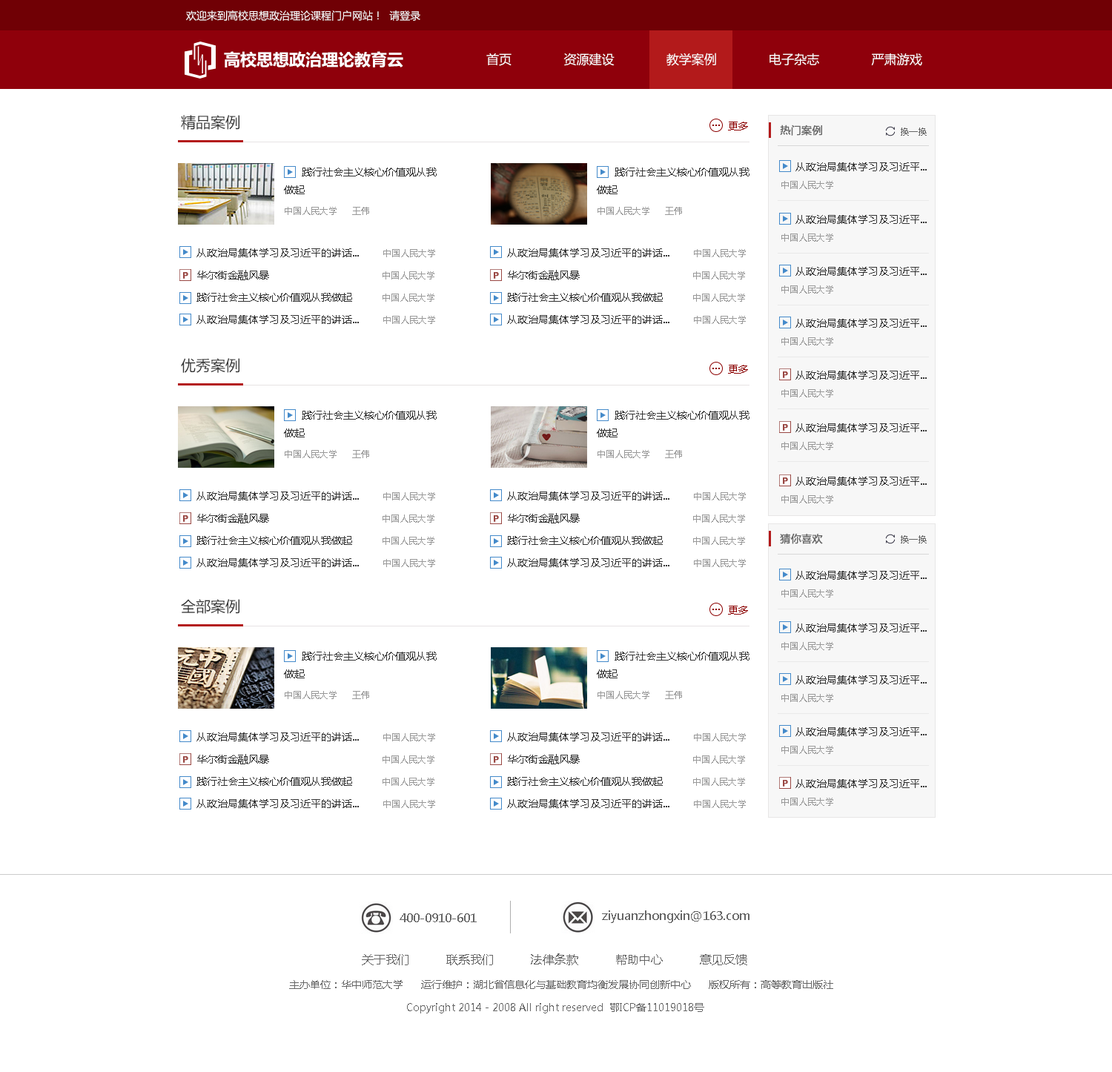
<style>
.page{position:relative;width:1112px;height:1072px;background:#ffffff}
.page>*{position:absolute;margin:0}
.t1{font:10.4px "MicrosoftYaHei";color:#ffffff}
.t2{font:16.3px "MicrosoftYaHei-Bold";color:#ffffff}
.t3{font:12.6px "MicrosoftYaHei";color:#ffffff}
.t4{font:14.8px "MicrosoftYaHei";color:#333333}
.t5{font:10.4px "MicrosoftYaHei";color:#8c0000}
.t6{font:10.4px "MicrosoftYaHei";color:#666666;font-weight:bold}
.t7{font:8.9px "MicrosoftYaHei";color:#666666}
.t8{font:10.4px/17.8px "MicrosoftYaHei";color:#333333}
.t9{font:10.4px/19.3px "MicrosoftYaHei";color:#333333}
.t10{font:8.9px/19.3px "MicrosoftYaHei";color:#999999}
.t11{font:8.9px "MicrosoftYaHei";color:#999999}
.t12{font:10.4px/22.2px "MicrosoftYaHei";color:#333333}
.t13{font:8.9px/22.2px "MicrosoftYaHei";color:#999999}
.t14{font:11.9px "MicrosoftYaHei";color:#666666}
.t15{font:10.4px "MicrosoftYaHei";color:#666666}
</style>
<div class="page">
<p class="t1" style="left:186px;top:10px;width:234px;height:11px">欢迎来到高校思想政治理论课程门户网站！  请登录</p>
<p class="t2" style="left:224px;top:51px;width:179px;height:16px">高校思想政治理论教育云</p>
<p class="t3" style="left:486px;top:53px;width:436px;height:13px">首页              资源建设              教学案例              电子杂志              严肃游戏</p>
<p class="t4" style="left:181px;top:115px;width:58px;height:15px">精品案例</p>
<p class="t5" style="left:728px;top:122px;width:20px;height:8px">更多</p>
<p class="t6" style="left:780px;top:125px;width:42px;height:11px">热门案例</p>
<p class="t7" style="left:901px;top:128px;width:26px;height:8px">换一换</p>
<p class="t8" style="left:284px;top:168px;width:153px;height:26px">践行社会主义核心价值观从我<br>做起</p>
<p class="t8" style="left:597px;top:168px;width:153px;height:26px">践行社会主义核心价值观从我<br>做起</p>
<p class="t9" style="left:781px;top:162px;width:146px;height:27px">从政治局集体学习及习近平...        <br><span class="t10">中国人民大学</span></p>
<p class="t11" style="left:285px;top:207px;width:84px;height:8px">中国人民大学     王伟</p>
<p class="t11" style="left:598px;top:207px;width:84px;height:8px">中国人民大学     王伟</p>
<p class="t9" style="left:781px;top:215px;width:146px;height:27px">从政治局集体学习及习近平...        <br><span class="t10">中国人民大学</span></p>
<p class="t12" style="left:196px;top:248px;width:239px;height:76px">从政治局集体学习及习近平的讲话...        <span class="t13">中国人民大学<br></span>华尔街金融风暴                                      <span class="t13">中国人民大学<br></span>践行社会主义核心价值观从我做起          <span class="t13">中国人民大学<br></span>从政治局集体学习及习近平的讲话...        <span class="t13">中国人民大学</span></p>
<p class="t12" style="left:507px;top:248px;width:239px;height:76px">从政治局集体学习及习近平的讲话...        <span class="t13">中国人民大学<br></span>华尔街金融风暴                                      <span class="t13">中国人民大学<br></span>践行社会主义核心价值观从我做起          <span class="t13">中国人民大学<br></span>从政治局集体学习及习近平的讲话...        <span class="t13">中国人民大学</span></p>
<p class="t9" style="left:781px;top:267px;width:146px;height:27px">从政治局集体学习及习近平...        <br><span class="t10">中国人民大学</span></p>
<p class="t9" style="left:781px;top:319px;width:146px;height:27px">从政治局集体学习及习近平...        <br><span class="t10">中国人民大学</span></p>
<p class="t4" style="left:181px;top:358px;width:58px;height:15px">优秀案例</p>
<p class="t5" style="left:728px;top:365px;width:20px;height:9px">更多</p>
<p class="t9" style="left:781px;top:371px;width:146px;height:26px">从政治局集体学习及习近平...        <br><span class="t10">中国人民大学</span></p>
<p class="t8" style="left:284px;top:411px;width:153px;height:26px">践行社会主义核心价值观从我<br>做起</p>
<p class="t8" style="left:597px;top:411px;width:153px;height:26px">践行社会主义核心价值观从我<br>做起</p>
<p class="t9" style="left:781px;top:423px;width:146px;height:27px">从政治局集体学习及习近平...        <br><span class="t10">中国人民大学</span></p>
<p class="t11" style="left:285px;top:450px;width:84px;height:8px">中国人民大学     王伟</p>
<p class="t11" style="left:598px;top:450px;width:84px;height:8px">中国人民大学     王伟</p>
<p class="t9" style="left:781px;top:477px;width:146px;height:26px">从政治局集体学习及习近平...        <br><span class="t10">中国人民大学</span></p>
<p class="t12" style="left:196px;top:492px;width:239px;height:75px">从政治局集体学习及习近平的讲话...        <span class="t13">中国人民大学<br></span>华尔街金融风暴                                      <span class="t13">中国人民大学<br></span>践行社会主义核心价值观从我做起          <span class="t13">中国人民大学<br></span>从政治局集体学习及习近平的讲话...        <span class="t13">中国人民大学</span></p>
<p class="t12" style="left:507px;top:492px;width:239px;height:75px">从政治局集体学习及习近平的讲话...        <span class="t13">中国人民大学<br></span>华尔街金融风暴                                      <span class="t13">中国人民大学<br></span>践行社会主义核心价值观从我做起          <span class="t13">中国人民大学<br></span>从政治局集体学习及习近平的讲话...        <span class="t13">中国人民大学</span></p>
<p class="t6" style="left:780px;top:533px;width:43px;height:11px">猜你喜欢</p>
<p class="t7" style="left:901px;top:535px;width:26px;height:8px">换一换</p>
<p class="t9" style="left:781px;top:571px;width:146px;height:27px">从政治局集体学习及习近平...        <br><span class="t10">中国人民大学</span></p>
<p class="t4" style="left:181px;top:599px;width:58px;height:15px">全部案例</p>
<p class="t5" style="left:728px;top:606px;width:20px;height:9px">更多</p>
<p class="t9" style="left:781px;top:624px;width:146px;height:26px">从政治局集体学习及习近平...        <br><span class="t10">中国人民大学</span></p>
<p class="t8" style="left:284px;top:652px;width:153px;height:26px">践行社会主义核心价值观从我<br>做起</p>
<p class="t8" style="left:597px;top:652px;width:153px;height:26px">践行社会主义核心价值观从我<br>做起</p>
<p class="t9" style="left:781px;top:675px;width:146px;height:27px">从政治局集体学习及习近平...        <br><span class="t10">中国人民大学</span></p>
<p class="t11" style="left:285px;top:691px;width:84px;height:8px">中国人民大学     王伟</p>
<p class="t11" style="left:598px;top:691px;width:84px;height:8px">中国人民大学     王伟</p>
<p class="t12" style="left:196px;top:733px;width:239px;height:75px">从政治局集体学习及习近平的讲话...        <span class="t13">中国人民大学<br></span>华尔街金融风暴                                      <span class="t13">中国人民大学<br></span>践行社会主义核心价值观从我做起          <span class="t13">中国人民大学<br></span>从政治局集体学习及习近平的讲话...        <span class="t13">中国人民大学</span></p>
<p class="t12" style="left:507px;top:733px;width:239px;height:75px">从政治局集体学习及习近平的讲话...        <span class="t13">中国人民大学<br></span>华尔街金融风暴                                      <span class="t13">中国人民大学<br></span>践行社会主义核心价值观从我做起          <span class="t13">中国人民大学<br></span>从政治局集体学习及习近平的讲话...        <span class="t13">中国人民大学</span></p>
<p class="t9" style="left:781px;top:727px;width:146px;height:27px">从政治局集体学习及习近平...        <br><span class="t10">中国人民大学</span></p>
<p class="t9" style="left:781px;top:779px;width:146px;height:27px">从政治局集体学习及习近平...        <br><span class="t10">中国人民大学</span></p>
<p class="t14" style="left:400px;top:913px;width:77px;height:9px">400-0910-601</p>
<p class="t14" style="left:602px;top:911px;width:148px;height:12px">ziyuanzhongxin@163.com</p>
<p class="t14" style="left:362px;top:954px;width:385px;height:11px">关于我们          联系我们          法律条款          帮助中心          意见反馈</p>
<p class="t15" style="left:289px;top:980px;width:544px;height:9px">主办单位：华中师范大学      运行维护：湖北省信息化与基础教育均衡发展协同创新中心      版权所有：高等教育出版社</p>
<p class="t15" style="left:407px;top:1003px;width:297px;height:11px">Copyright 2014 - 2008 All right reserved  鄂ICP备11019018号</p>
</div>
